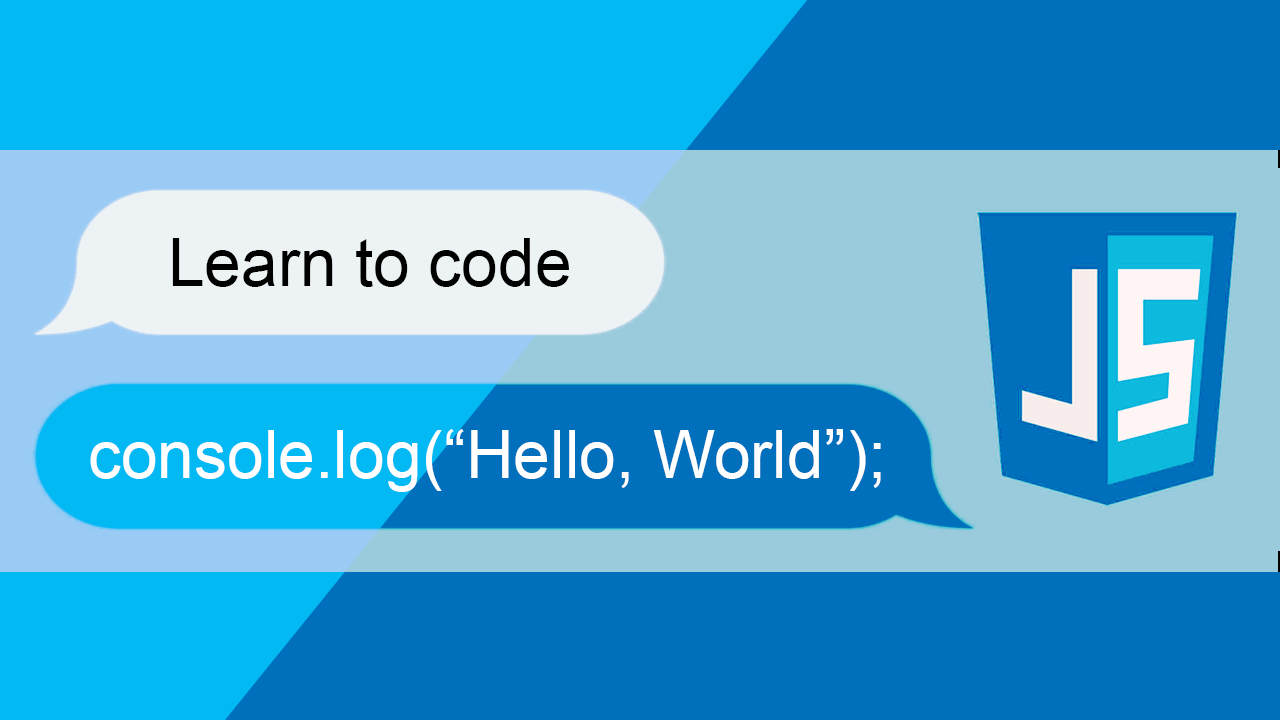
<style>
.page{position:relative;width:1280px;height:720px;background:#0170bc}
.page>*{position:absolute;margin:0}
.t1{font:66px "ArialMT";color:#000000}
.t2{font:66px "ArialMT";color:#ffffff}
</style>
<div class="page">
<p class="t1" style="left:172px;top:238px;width:397px;height:49px">Learn to code</p>
<p class="t2" style="left:90px;top:429px;width:791px;height:63px">console.log(“Hello, World”);</p>
</div>
